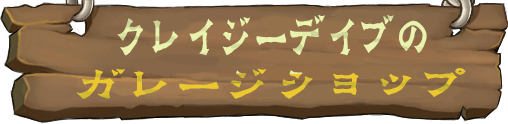
<style>
.page{position:relative;width:508px;height:124px}
.page>*{position:absolute;margin:0}
.t1{font:52.6px "GraveBustedStoneLishuSCRoughlyC";letter-spacing:0.02em;color:#e7edad;scale:0.73 1}
.t2{font:41.3px "GraveBustedStoneLishuSCRoughlyC";letter-spacing:0.07em;color:#e5ca2d;scale:1.23 1}
</style>
<div class="page">
<p class="t1" style="left:117px;top:15px;width:310px;height:41px">クレイジーデイブの</p>
<p class="t2" style="left:77px;top:68px;width:389px;height:31px">ガレージショップ</p>
</div>
